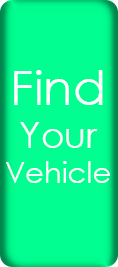
<style>
.page{position:relative;width:118px;height:267px;background:#00ff90}
.page>*{position:absolute;margin:0}
.t1{font:29.1px "CenturyGothic";color:#ffffff}
.t2{font:48px "CenturyGothic";color:#ffffff}
.t3{font:36px "CenturyGothic";color:#ffffff}
</style>
<div class="page">
<p class="t1" style="left:6px;top:70px;width:104px;height:113px;text-align:center"><span class="t2">Find<br></span><span class="t3">Your<br></span>Vehicle</p>
</div>
